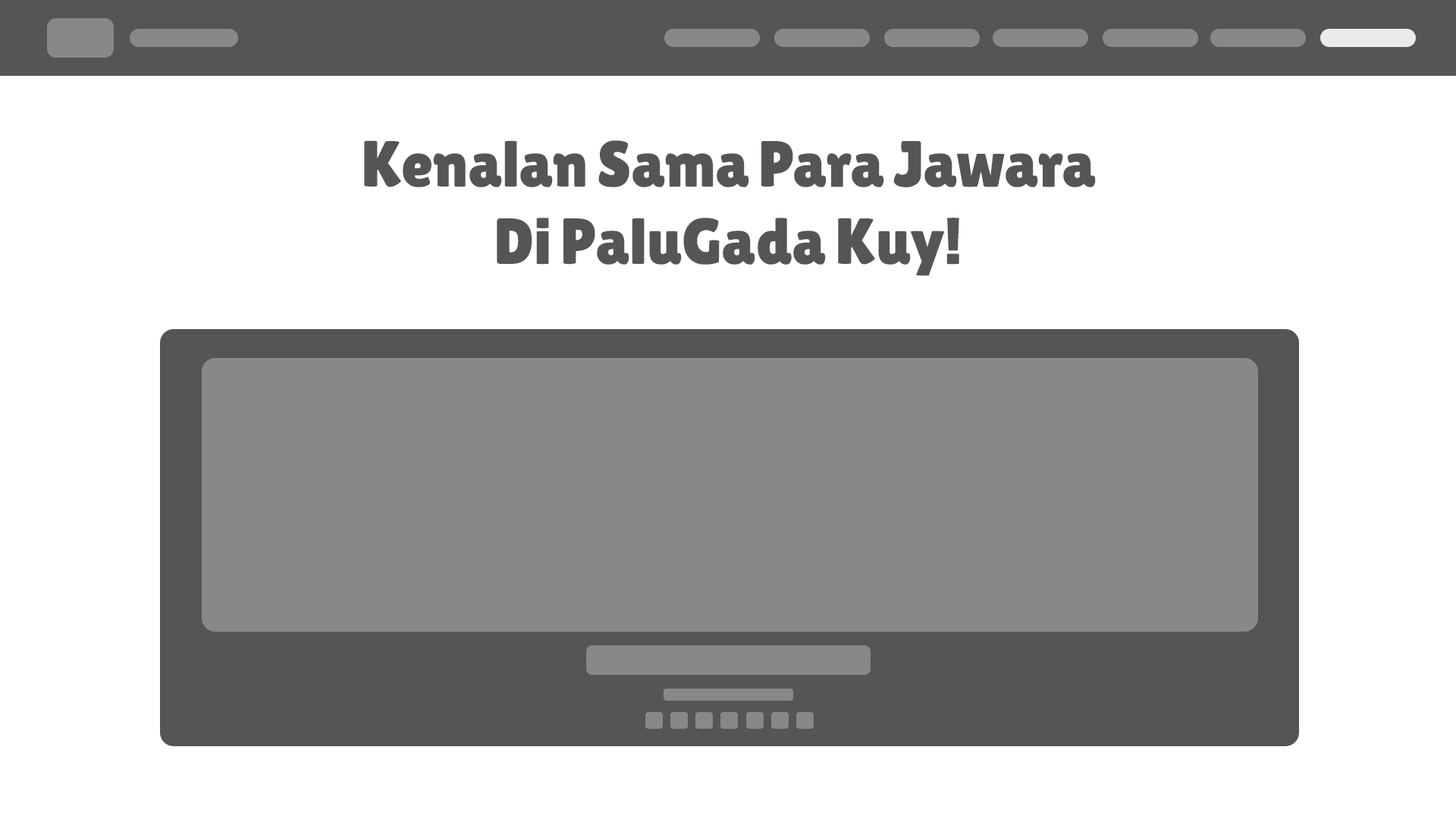
<style>
.page{position:relative;width:1456px;height:819px;background:#ffffff}
.page>*{position:absolute;margin:0}
.t1{font:64.9px "LilitaOne";letter-spacing:-0.025em;color:#555555}
</style>
<div class="page">
<p class="t1" style="left:364px;top:140px;width:732px;height:136px;text-align:center">Kenalan Sama Para Jawara<br>Di PaluGada Kuy!</p>
</div>
